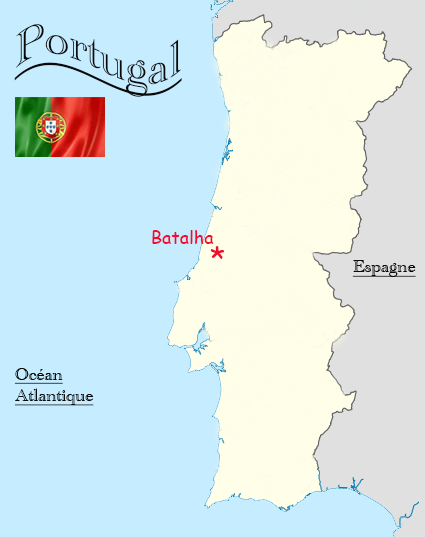
<style>
.page{position:relative;width:425px;height:537px;background:#c6ecff}
.page>*{position:absolute;margin:0}
.t1{font:48px "AcademyEngravedLetPlain";color:#0a0908;text-decoration:underline}
.t2{font:18px "ComicSansMS";color:#f20c2d}
.t3{font:30px "ComicSansMS";color:#f20c2d}
.t4{font:18px "AcademyEngravedLetPlain";color:#0a0908;text-decoration:underline}
</style>
<div class="page">
<p class="t1" style="left:14px;top:24px;width:168px;height:73px">Portugal</p>
<p class="t2" style="left:152px;top:230px;width:62px;height:14px">Batalha</p>
<p class="t3" style="left:210px;top:246px;width:15px;height:13px">*</p>
<p class="t4" style="left:352px;top:260px;width:64px;height:17px">Espagne</p>
<p class="t4" style="left:14px;top:368px;width:80px;height:38px">Océan<br>Atlantique</p>
</div>
